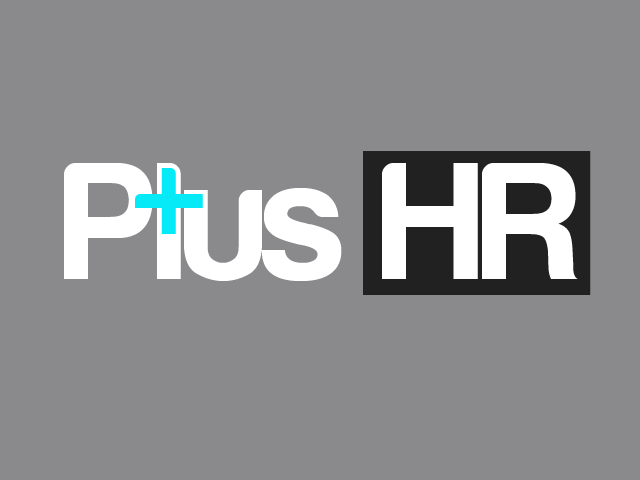
<style>
.page{position:relative;width:640px;height:480px;background:#8a8a8c}
.page>*{position:absolute;margin:0}
.t1{font:172px "HarabaraBold";letter-spacing:-0.005em;color:#ffffff}
.t2{font:152.9px "HarabaraBold";letter-spacing:-0.005em;color:#06e9f7}
</style>
<div class="page">
<p class="t1" style="left:64px;top:163px;width:514px;height:118px">Plus HR</p>
<p class="t2" style="left:135px;top:168px;width:68px;height:66px">+</p>
</div>
